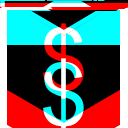
<style>
.page{position:relative;width:128px;height:128px;background:#000000}
.page>*{position:absolute;margin:0}
.t1{font:85.4px "ArialMT"}
</style>
<div class="page">
<p class="t1" style="left:43px;top:20px;width:41px;height:76px">$</p>
</div>
